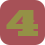
<style>
.page{position:relative;width:45px;height:45px;background:#a75157}
.page>*{position:absolute;margin:0}
.t1{font:50px "Saddlebag-Black";color:#949146}
</style>
<div class="page">
<p class="t1" style="left:6px;top:10px;width:32px;height:26px">4</p>
</div>
